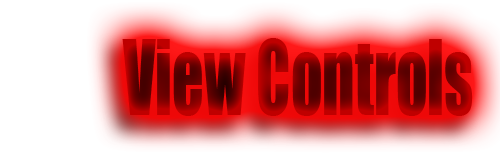
<style>
.page{position:relative;width:500px;height:160px;background:#ffffff}
.page>*{position:absolute;margin:0}
.t1{font:96px "Impact";scale:0.65 1}
</style>
<div class="page">
<p class="t1" style="left:122px;top:38px;width:351px;height:78px">View Controls</p>
</div>
